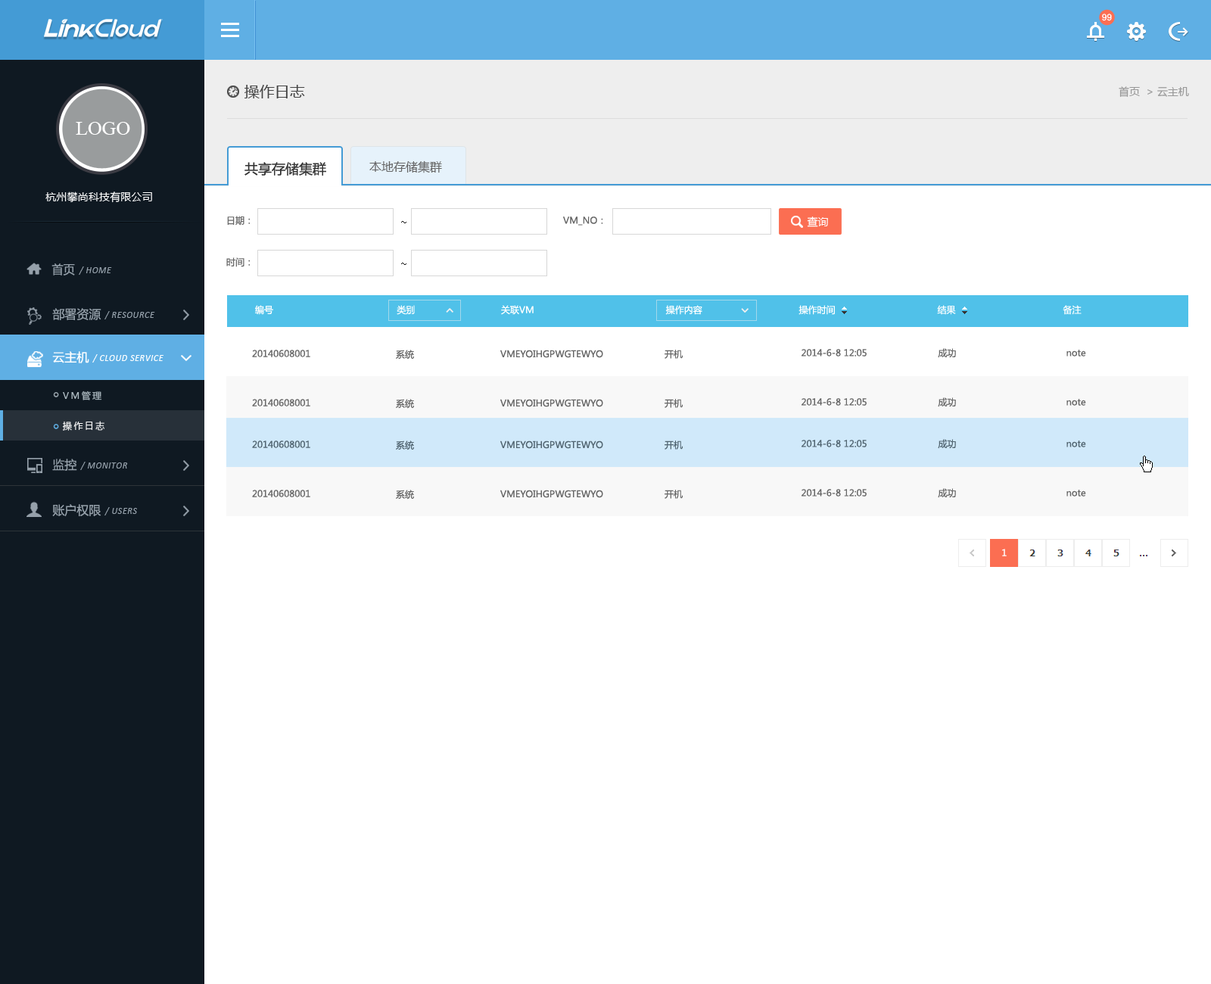
<style>
.page{position:relative;width:1211px;height:984px;background:#ffffff}
.page>*{position:absolute;margin:0}
.t1{font:9.1px "ArialMT";color:#ffffff}
.t2{font:15.1px "MicrosoftYaHei";color:#444444}
.t3{font:10.6px "MicrosoftYaHei";color:#999999}
.t4{font:19.7px "TimesNewRomanPSMT";color:#ffffff}
.t5{font:12.1px "MicrosoftYaHei";color:#666666}
.t6{font:13.6px "MicrosoftYaHei";color:#333333}
.t7{font:10.6px "MicrosoftYaHei";letter-spacing:0.01em;color:#ffffff}
.t8{font:9.1px "MicrosoftYaHei";letter-spacing:0.01em;color:#666666}
.t9{font:10.6px "SimSun";letter-spacing:0.01em;color:#000000}
.t10{font:10.6px "MicrosoftYaHei";color:#ffffff}
.t11{font:12.1px "MicrosoftYaHei";color:#95a0aa;scale:0.96 1}
.t12{font:9.1px "Calibri-Italic";letter-spacing:0.05em;color:#95a0aa}
.t13{font:9.1px "MicrosoftYaHei";color:#ffffff}
.t14{font:12.1px "MicrosoftYaHei";color:#95a0aa}
.t15{font:9.1px "Calibri-Italic";letter-spacing:0.05em;color:#95a0aa;text-transform:uppercase}
.t16{font:12.1px "MicrosoftYaHei";color:#ffffff}
.t17{font:9.1px "MicrosoftYaHei";color:#666666}
.t18{font:9.1px "Calibri-Italic";letter-spacing:0.05em;color:#ffffff;text-transform:uppercase}
.t19{font:9.1px "Calibri-Italic";letter-spacing:0.05em;color:#ffffff}
.t20{font:9.1px/30.3px "MicrosoftYaHei";letter-spacing:0.2em;color:#b0bdc4}
.t21{font:9.1px/30.3px "MicrosoftYaHei";letter-spacing:0.2em;color:#ffffff}
.t22{font:9.1px "MicrosoftYaHei";color:#506470}
.t23{font:9.1px "MicrosoftYaHei";color:#fffefe}
</style>
<div class="page">
<p class="t1" style="left:1102px;top:14px;width:10px;height:7px">99</p>
<p class="t2" style="left:245px;top:85px;width:60px;height:13px">操作日志</p>
<p class="t3" style="left:1119px;top:86px;width:70px;height:11px">首页  &gt; 云主机</p>
<p class="t4" style="left:76px;top:122px;width:54px;height:13px">LOGO</p>
<p class="t5" style="left:369px;top:161px;width:73px;height:12px">本地存储集群</p>
<p class="t6" style="left:245px;top:162px;width:81px;height:14px">共享存储集群</p>
<p class="t7" style="left:45px;top:192px;width:107px;height:11px">杭州攀尚科技有限公司</p>
<p class="t8" style="left:227px;top:216px;width:24px;height:10px">日期：</p>
<p class="t9" style="left:401px;top:221px;width:6px;height:2px">~</p>
<p class="t8" style="left:563px;top:217px;width:40px;height:9px">VM_NO：</p>
<p class="t10" style="left:807px;top:217px;width:21px;height:10px">查询</p>
<p class="t8" style="left:226px;top:257px;width:25px;height:10px">时间：</p>
<p class="t11" style="left:51px;top:263px;width:24px;height:13px">首页</p>
<p class="t12" style="left:79px;top:267px;width:33px;height:8px">/ HOME</p>
<p class="t9" style="left:401px;top:263px;width:6px;height:2px">~</p>
<p class="t13" style="left:255px;top:305px;width:827px;height:10px">编号                                              类别                                关联VM                                                 操作内容                                    操作时间                                      结果                                        备注</p>
<p class="t14" style="left:52px;top:308px;width:49px;height:12px">部署资源</p>
<p class="t15" style="left:104px;top:311px;width:51px;height:9px"><span class="t12">/ </span>resource</p>
<p class="t16" style="left:52px;top:351px;width:37px;height:12px">云主机</p>
<p class="t17" style="left:252px;top:350px;width:58px;height:7px">20140608001</p>
<p class="t17" style="left:396px;top:350px;width:18px;height:10px">系统</p>
<p class="t17" style="left:500px;top:350px;width:103px;height:8px">VMEYOIHGPWGTEWYO</p>
<p class="t17" style="left:665px;top:350px;width:18px;height:9px">开机</p>
<p class="t17" style="left:802px;top:349px;width:65px;height:8px">2014-6-8 12:05</p>
<p class="t17" style="left:938px;top:348px;width:18px;height:10px">成功</p>
<p class="t17" style="left:1067px;top:350px;width:20px;height:7px">note</p>
<p class="t18" style="left:92px;top:354px;width:72px;height:9px"><span class="t19">/ </span>cloud service</p>
<p class="t20" style="left:62px;top:391px;width:42px;height:40px">VM管理<br><span class="t21">操作日志<br></span>基础资源</p>
<p class="t17" style="left:252px;top:399px;width:58px;height:8px">20140608001</p>
<p class="t17" style="left:396px;top:399px;width:18px;height:10px">系统</p>
<p class="t17" style="left:500px;top:399px;width:103px;height:8px">VMEYOIHGPWGTEWYO</p>
<p class="t17" style="left:665px;top:399px;width:18px;height:9px">开机</p>
<p class="t17" style="left:802px;top:398px;width:65px;height:8px">2014-6-8 12:05</p>
<p class="t17" style="left:938px;top:398px;width:18px;height:9px">成功</p>
<p class="t17" style="left:1067px;top:399px;width:20px;height:7px">note</p>
<p class="t22" style="left:252px;top:441px;width:58px;height:7px">20140608001</p>
<p class="t22" style="left:396px;top:441px;width:18px;height:10px">系统</p>
<p class="t22" style="left:500px;top:441px;width:103px;height:8px">VMEYOIHGPWGTEWYO</p>
<p class="t22" style="left:665px;top:441px;width:18px;height:9px">开机</p>
<p class="t22" style="left:802px;top:440px;width:65px;height:7px">2014-6-8 12:05</p>
<p class="t22" style="left:938px;top:439px;width:18px;height:10px">成功</p>
<p class="t22" style="left:1067px;top:441px;width:20px;height:6px">note</p>
<p class="t14" style="left:52px;top:459px;width:25px;height:12px">监控</p>
<p class="t15" style="left:80px;top:462px;width:48px;height:8px"><span class="t12">/ </span>monitor</p>
<p class="t17" style="left:252px;top:490px;width:58px;height:7px">20140608001</p>
<p class="t17" style="left:396px;top:490px;width:18px;height:10px">系统</p>
<p class="t17" style="left:500px;top:490px;width:103px;height:8px">VMEYOIHGPWGTEWYO</p>
<p class="t17" style="left:665px;top:490px;width:18px;height:9px">开机</p>
<p class="t17" style="left:802px;top:489px;width:65px;height:8px">2014-6-8 12:05</p>
<p class="t17" style="left:938px;top:488px;width:18px;height:10px">成功</p>
<p class="t17" style="left:1067px;top:490px;width:20px;height:7px">note</p>
<p class="t14" style="left:52px;top:504px;width:49px;height:12px">账户权限</p>
<p class="t15" style="left:104px;top:507px;width:33px;height:9px"><span class="t12">/ </span>users</p>
<p class="t23" style="left:1002px;top:549px;width:5px;height:8px">1</p>
</div>
